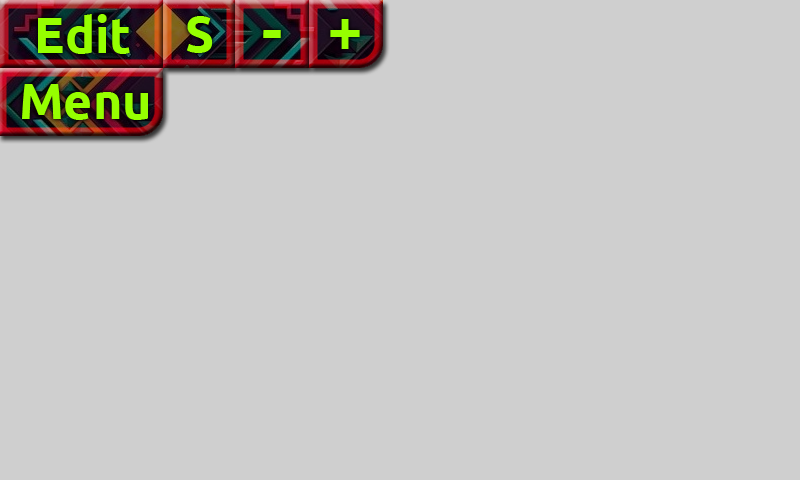
<style>
.page{position:relative;width:800px;height:480px;background:#cfcfcf}
.page>*{position:absolute;margin:0}
.t1{font:50px "Ubuntu-Bold";color:#96ff00}
.t2{font:50px "GrilledCheeseBTN";color:#96ff00}
</style>
<div class="page">
<p class="t1" style="left:38px;top:14px;width:92px;height:40px">Edit</p>
<p class="t1" style="left:186px;top:16px;width:27px;height:37px">S</p>
<p class="t2" style="left:263px;top:30px;width:18px;height:8px">-</p>
<p class="t2" style="left:330px;top:19px;width:30px;height:30px">+</p>
<p class="t1" style="left:22px;top:84px;width:126px;height:36px">Menu</p>
</div>
